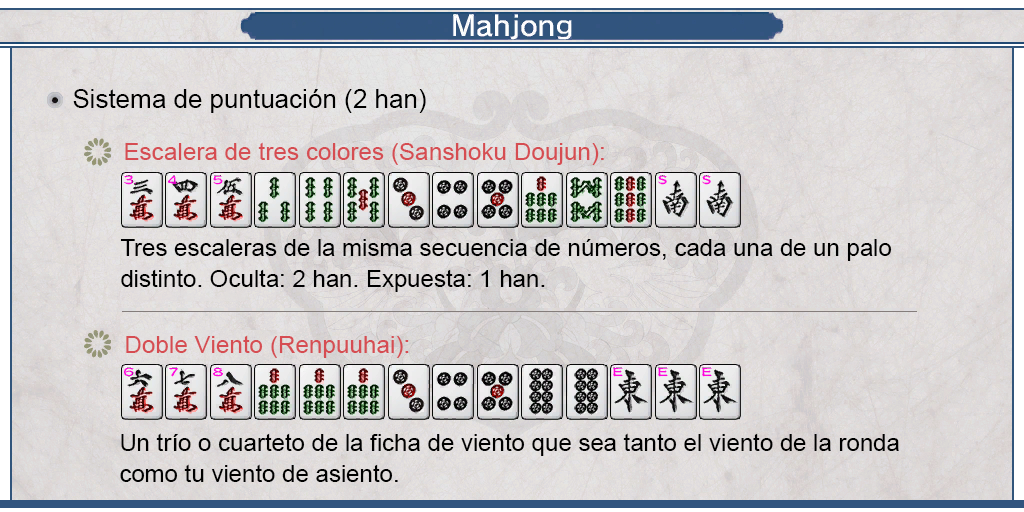
<style>
.page{position:relative;width:1024px;height:512px}
.page>*{position:absolute;margin:0}
.t1{font:26px "ArialMT";color:#000000}
.t2{font:24px "ArialMT";color:#d64d52}
.t3{font:24px/31px "ArialMT";color:#000000}
</style>
<div class="page">
<p class="t1" style="left:73px;top:89px;width:353px;height:24px">Sistema de puntuación (2 han)</p>
<p class="t2" style="left:125px;top:142px;width:479px;height:23px">Escalera de tres colores (Sanshoku Doujun):</p>
<p class="t3" style="left:120px;top:239px;width:772px;height:53px;text-align:justify">Tres escaleras de la misma secuencia de números, cada una de un palo <br>distinto. Oculta: 2 han. Expuesta: 1 han.</p>
<p class="t2" style="left:126px;top:335px;width:283px;height:23px">Doble Viento (Renpuuhai):</p>
<p class="t3" style="left:120px;top:433px;width:779px;height:49px;text-align:justify">Un trío o cuarteto de la ficha de viento que sea tanto el viento de la ronda <br>como tu viento de asiento.</p>
</div>
